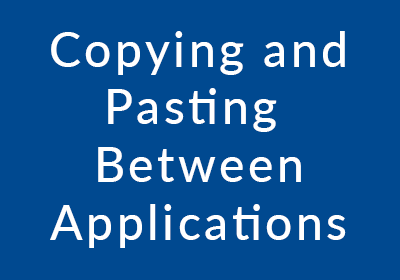
<style>
.page{position:relative;width:400px;height:280px;background:#004990}
.page>*{position:absolute;margin:0}
.t1{font:48px "Lato-Medium";letter-spacing:0.075em;color:#ffffff}
</style>
<div class="page">
<p class="t1" style="left:50px;top:31px;width:296px;height:217px;text-align:center">Copying and<br>Pasting <br>Between<br>Applications</p>
</div>
